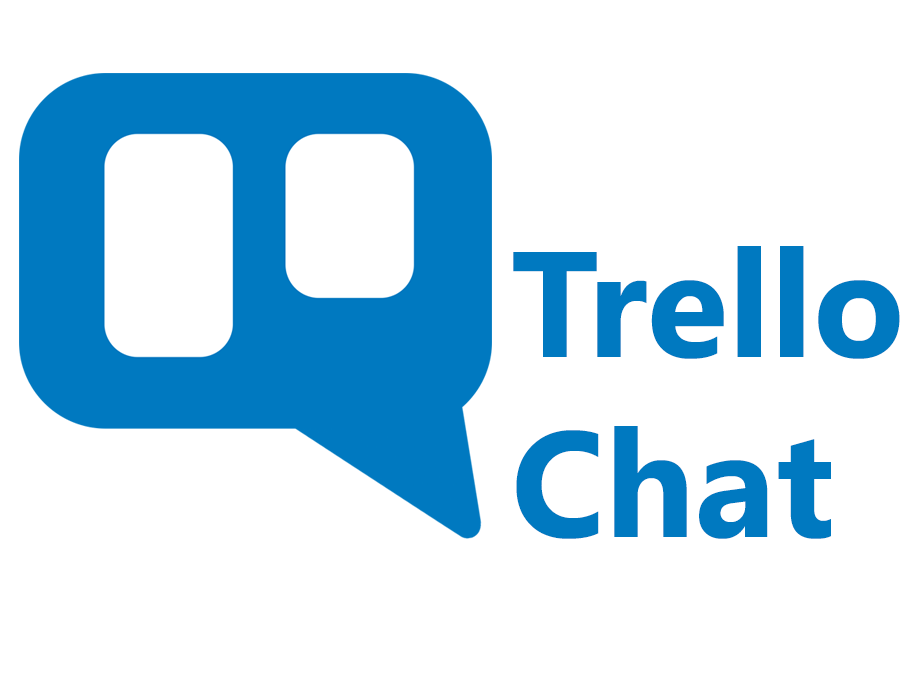
<style>
.page{position:relative;width:920px;height:680px;background:#ffffff}
.page>*{position:absolute;margin:0}
.t1{font:150px "SegoeUI-Bold";color:#0079c0}
</style>
<div class="page">
<p class="t1" style="left:513px;top:246px;width:387px;height:293px">Trello<br>Chat</p>
</div>
